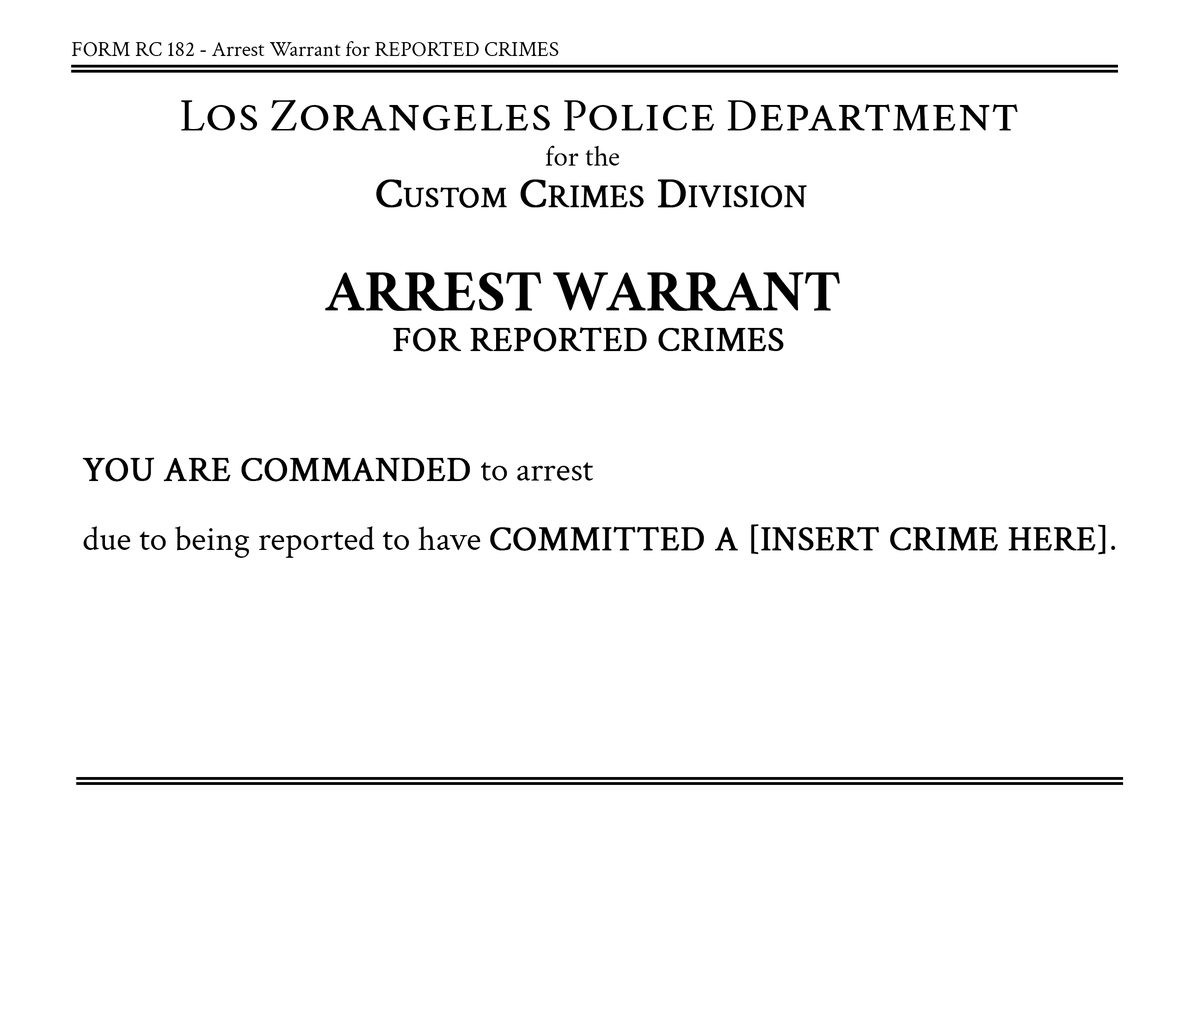
<style>
.page{position:relative;width:1179px;height:1012px;background:#ffffff}
.page>*{position:absolute;margin:0}
.t1{font:21.2px "CrimsonText-Regular";color:#000000}
.t2{font:57.8px "Crimson-Roman";color:#000000;font-variant:small-caps}
.t3{font:46.2px "Crimson-Roman";color:#000000}
.t4{font:28.9px "Crimson-Roman";color:#000000}
.t5{font:42.4px "CrimsonText-Regular";color:#000000;font-variant:small-caps;font-weight:bold}
.t6{font:46.2px "CrimsonText-Regular";color:#000000;font-variant:small-caps;font-weight:bold}
.t7{font:57.8px "Crimson-Bold";color:#000000}
.t8{font:34.7px "CrimsonText-Regular";color:#000000;font-weight:bold}
.t9{font:34.7px/69.3px "CrimsonText-Regular";color:#000000}
.t10{font:34.7px/69.3px "CrimsonText-Regular";color:#000000;font-weight:bold}
</style>
<div class="page">
<p class="t1" style="left:72px;top:41px;width:486px;height:15px">FORM RC 182 - Arrest Warrant for REPORTED CRIMES</p>
<p class="t2" style="left:181px;top:100px;width:837px;height:31px"><span class="t3">L</span>os<span class="t3"> Z</span>orangeles<span class="t3"> P</span>olice<span class="t3"> D</span>epartment</p>
<p class="t4" style="left:546px;top:146px;width:73px;height:20px">for the</p>
<p class="t5" style="left:376px;top:179px;width:431px;height:29px">Custom C<span class="t6">rimes </span>D<span class="t6">ivision</span></p>
<p class="t7" style="left:325px;top:272px;width:515px;height:39px">ARREST WARRANT</p>
<p class="t8" style="left:393px;top:327px;width:391px;height:24px">FOR REPORTED CRIMES</p>
<p class="t9" style="left:83px;top:457px;width:1032px;height:101px"><span class="t10">YOU ARE COMMANDED </span>to arrest<br>due to being reported to have <span class="t10">COMMITTED A [INSERT CRIME HERE]</span>.</p>
</div>
